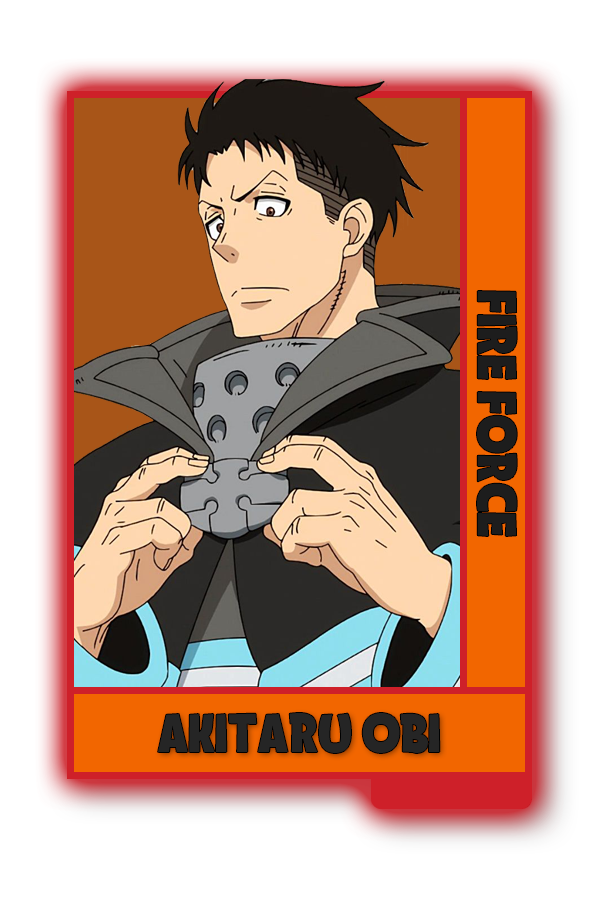
<style>
.page{position:relative;width:600px;height:900px;background:#ffffff}
.page>*{position:absolute;margin:0}
.t1{font:69.6px "AristonComicDemo-Regular";color:#1d1d1d}
.t2{font:69.1px "AristonComicDemo-Regular";color:#252525}
</style>
<div class="page">
<p class="t1" style="left:477px;top:291px;width:40px;height:245px;rotate:90deg">FIRE FORCE</p>
<p class="t2" style="left:158px;top:713px;width:282px;height:40px">AKITARU OBI</p>
</div>
